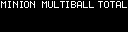
<style>
.page{position:relative;width:128px;height:32px;background:#000000}
.page>*{position:absolute;margin:0}
.t1{font:10px "Terminal";letter-spacing:-0.15em;color:#ffffff}
</style>
<div class="page">
<p class="t1" style="left:1px;top:1px;width:93px;height:7px">MINION MULTIBALL</p>
</div>
